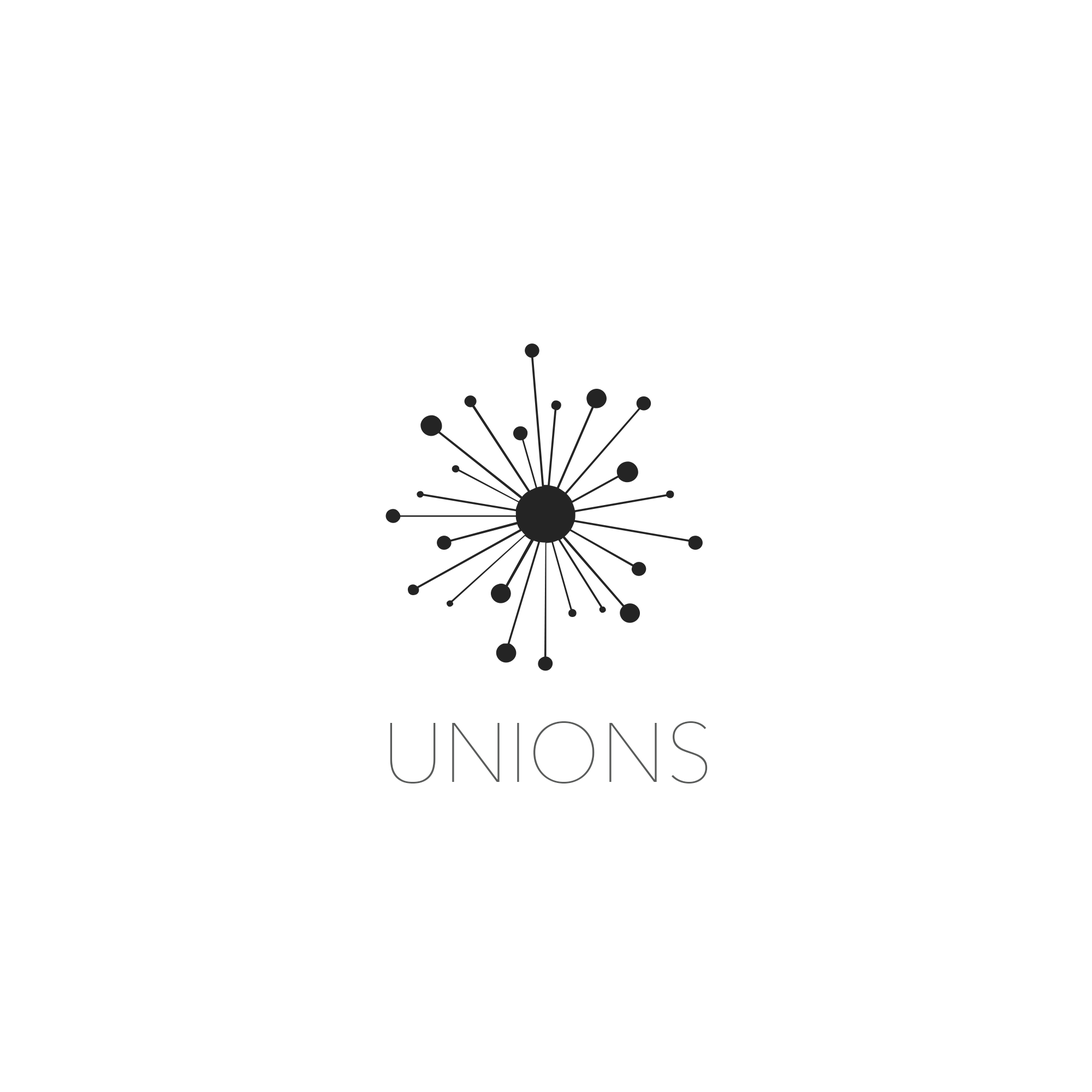
<style>
.page{position:relative;width:1092px;height:1092px;background:#ffffff}
.page>*{position:absolute;margin:0}
.t1{font:83.6px "AvenirNext-UltraLight";color:#5a5c5b}
</style>
<div class="page">
<p class="t1" style="left:390px;top:721px;width:318px;height:62px">UNIONS</p>
</div>
